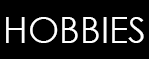
<style>
.page{position:relative;width:149px;height:59px;background:#000000}
.page>*{position:absolute;margin:0}
.t1{font:36px "CenturyGothic";color:#ffffff}
</style>
<div class="page">
<p class="t1" style="left:6px;top:17px;width:138px;height:26px">HOBBIES</p>
</div>
